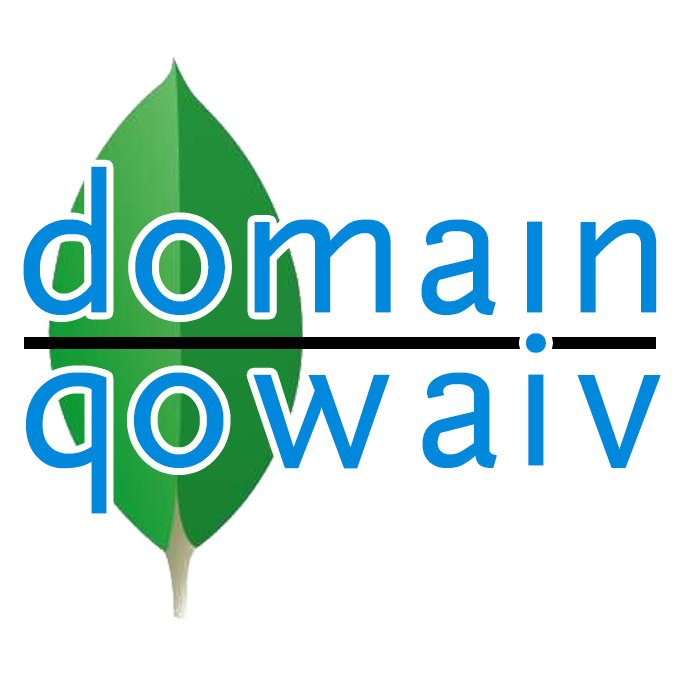
<style>
.page{position:relative;width:680px;height:680px;background:#ffffff}
.page>*{position:absolute;margin:0}
.t1{font:200px "Scala-Regular";letter-spacing:0.02em;color:#0088dd}
.t2{font:200px "Scala-Regular";letter-spacing:0.1em;color:#0088dd}
.t3{font:200px "Scala-Regular";letter-spacing:0.1em;color:#0088dd;scale:1.04 1}
.t4{font:200px "Scala-Regular";letter-spacing:0.07em;color:#0088dd}
</style>
<div class="page">
<p class="t1" style="left:23px;top:166px;width:634px;height:149px">domain</p>
<p class="t1" style="left:25px;top:333px;width:636px;height:181px">q<span class="t2">o</span><span class="t3">w</span>a<span class="t4">i</span>v</p>
</div>
